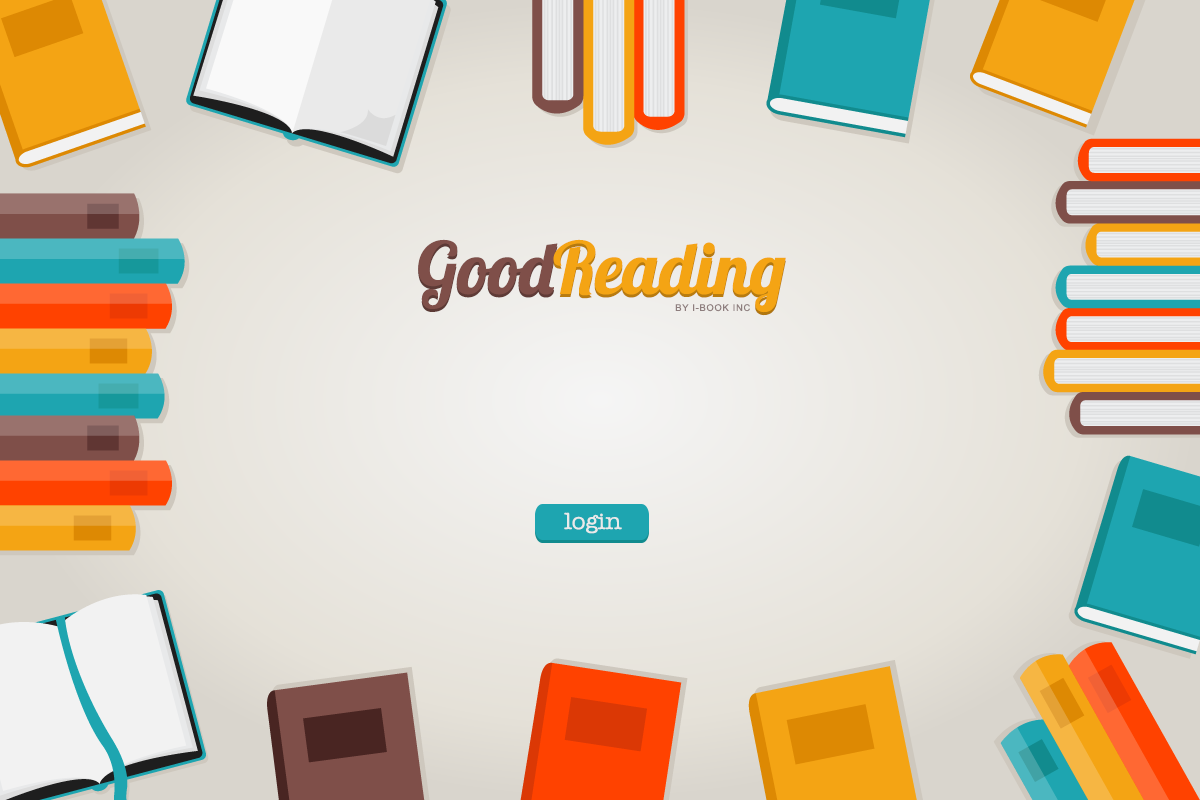
<style>
.page{position:relative;width:1200px;height:800px}
.page>*{position:absolute;margin:0}
.t1{font:72px "Lobster1.4";letter-spacing:-0.01em;color:#f4a414}
.t2{font:72px "Lobster1.4";letter-spacing:-0.01em;color:#7f4f49}
.t3{font:9.3px "ArialMT";letter-spacing:0.075em;color:#8e7e7e}
.t4{font:24px "AmerTypewriterITCbyBT-Medium";letter-spacing:-0.01em;color:#eaeaea}
</style>
<div class="page">
<p class="t1" style="left:418px;top:242px;width:368px;height:74px"><span class="t2">Good</span>Reading</p>
<p class="t1" style="left:418px;top:239px;width:368px;height:74px"><span class="t2">Good</span>Reading</p>
<p class="t3" style="left:675px;top:304px;width:75px;height:8px">BY I-BOOK INC</p>
<p class="t4" style="left:564px;top:512px;width:58px;height:22px">login</p>
</div>
